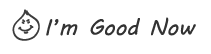
<style>
.page{position:relative;width:211px;height:54px;background:#ffffff}
.page>*{position:absolute;margin:0}
.t1{font:22px "MVBoli";color:#333333}
</style>
<div class="page">
<p class="t1" style="left:46px;top:17px;width:150px;height:19px">I’m Good Now</p>
</div>
